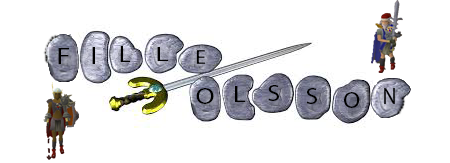
<style>
.page{position:relative;width:450px;height:163px;background:#ffffff}
.page>*{position:absolute;margin:0}
.t1{font:23.5px "MyriadPro-Regular";color:#000000;scale:1.24 1}
.t2{font:24.8px "MyriadPro-Regular";color:#000000;scale:1.2 1}
.t3{font:23.3px "MyriadPro-Regular";color:#000000;scale:1.08 1}
.t4{font:19.8px "MyriadPro-Regular";color:#000000;scale:1.45 1}
.t5{font:19.5px "MyriadPro-Regular";color:#000000;scale:1.09 1}
.t6{font:23.2px "MyriadPro-Regular";color:#000000;scale:1.18 1}
.t7{font:22.9px "MyriadPro-Regular";color:#000000;scale:1.19 1}
.t8{font:22.9px "MyriadPro-Regular";color:#000000;scale:1.14 1}
.t9{font:22.5px "MyriadPro-Regular";color:#000000;scale:1.09 1}
.t10{font:22.8px "MyriadPro-Regular";color:#000000;scale:0.91 1}
.t11{font:23.6px "MyriadPro-Regular";color:#000000;scale:1.06 1}
</style>
<div class="page">
<p class="t1" style="left:58px;top:48px;width:11px;height:16px">F</p>
<p class="t2" style="left:92px;top:47px;width:3px;height:17px">I</p>
<p class="t3" style="left:120px;top:46px;width:11px;height:16px">L</p>
<p class="t4" style="left:157px;top:47px;width:12px;height:14px">L</p>
<p class="t5" style="left:196px;top:50px;width:10px;height:14px">E</p>
<p class="t6" style="left:196px;top:88px;width:18px;height:16px">O</p>
<p class="t7" style="left:235px;top:86px;width:11px;height:16px">L</p>
<p class="t8" style="left:268px;top:85px;width:11px;height:16px">S</p>
<p class="t9" style="left:306px;top:88px;width:11px;height:16px">S</p>
<p class="t10" style="left:384px;top:88px;width:11px;height:16px">N</p>
<p class="t11" style="left:344px;top:92px;width:16px;height:16px">O</p>
</div>
